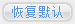
<style>
.page{position:relative;width:75px;height:24px}
.page>*{position:absolute;margin:0}
.t1{font:13px "SimSun";letter-spacing:0.008em;color:#5796df}
</style>
<div class="page">
<p class="t1" style="left:12px;top:6px;width:51px;height:12px">恢复默认</p>
</div>
